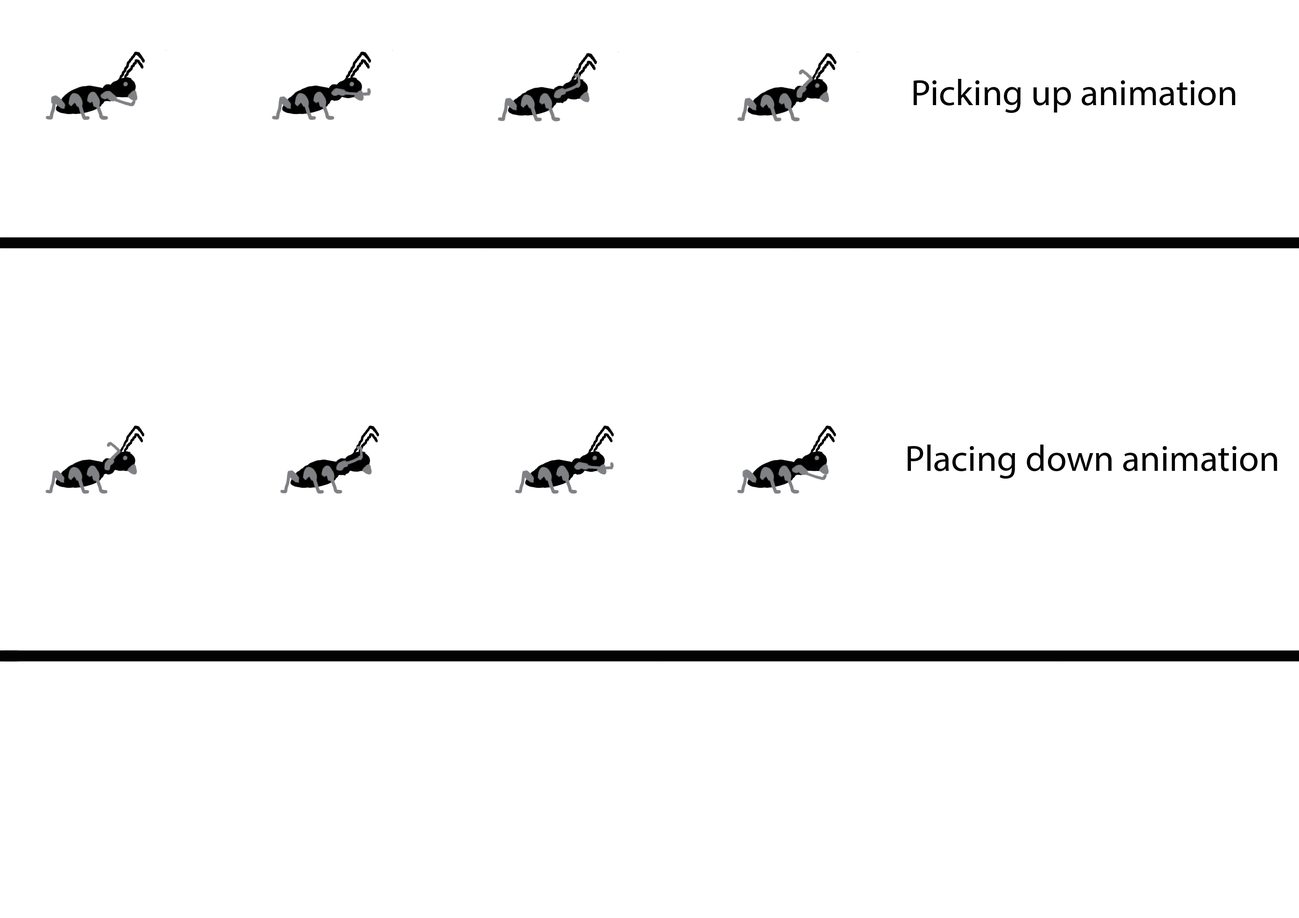
<style>
.page{position:relative;width:1299px;height:918px;background:#ffffff}
.page>*{position:absolute;margin:0}
.t1{font:37px "MyriadPro-Regular";color:#030303}
</style>
<div class="page">
<p class="t1" style="left:913px;top:79px;width:322px;height:34px">Picking up animation</p>
<p class="t1" style="left:907px;top:445px;width:370px;height:34px">Placing down animation</p>
</div>
